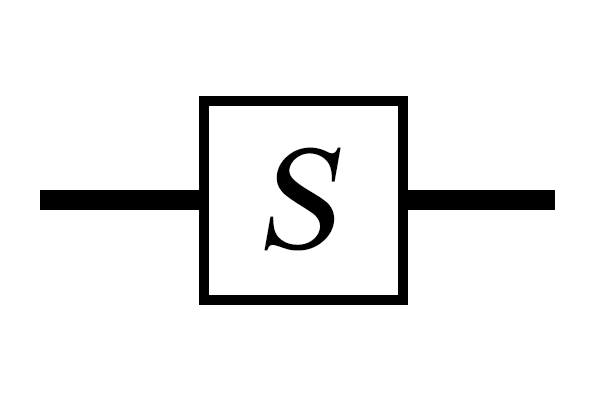
<style>
.page{position:relative;width:600px;height:400px;background:#ffffff}
.page>*{position:absolute;margin:0}
.t1{font:148.5px "TimesNewRomanPSMT";color:#000000;font-style:italic}
</style>
<div class="page">
<p class="t1" style="left:264px;top:147px;width:77px;height:104px">S</p>
</div>
